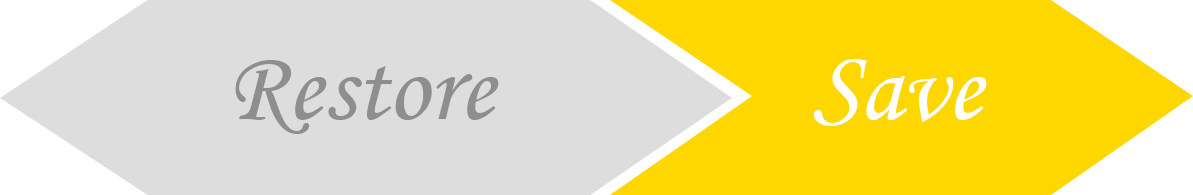
<style>
.page{position:relative;width:1193px;height:195px;background:#dddddd}
.page>*{position:absolute;margin:0}
.t1{font:102px "MonotypeCorsiva";color:#8e8e8e}
.t2{font:102px "MonotypeCorsiva";color:#ffffff}
</style>
<div class="page">
<p class="t1" style="left:235px;top:60px;width:264px;height:74px">Restore</p>
<p class="t2" style="left:813px;top:59px;width:174px;height:67px">Save</p>
</div>
